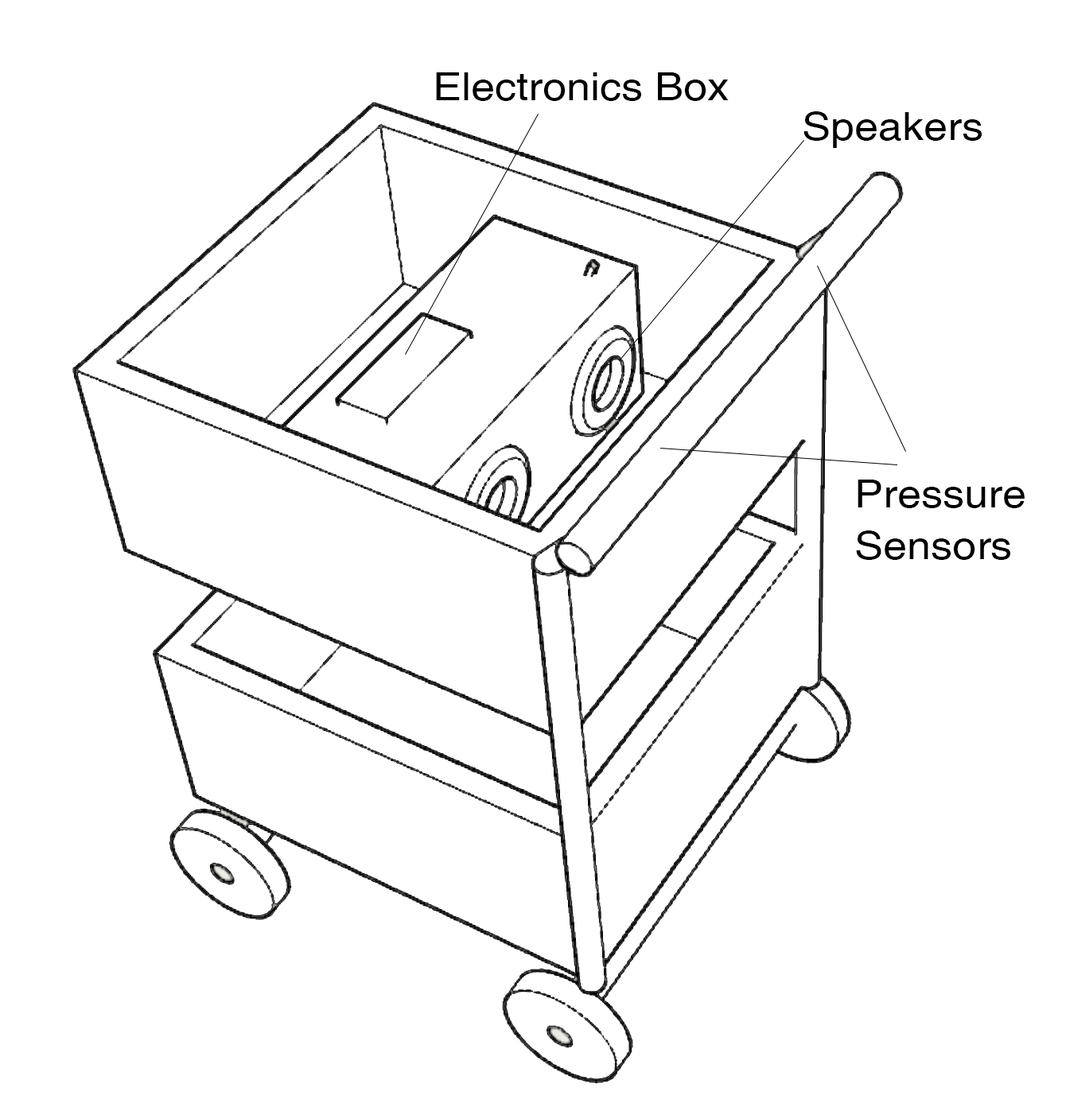
<style>
.page{position:relative;width:1066px;height:1119px;background:#ffffff}
.page>*{position:absolute;margin:0}
.t1{font:38.7px "Helvetica";color:#000000;scale:1.11 1}
</style>
<div class="page">
<p class="t1" style="left:436px;top:72px;width:292px;height:29px">Electronics Box</p>
<p class="t1" style="left:803px;top:111px;width:178px;height:37px">Speakers</p>
<p class="t1" style="left:856px;top:480px;width:168px;height:80px">Pressure<br>Sensors</p>
</div>
